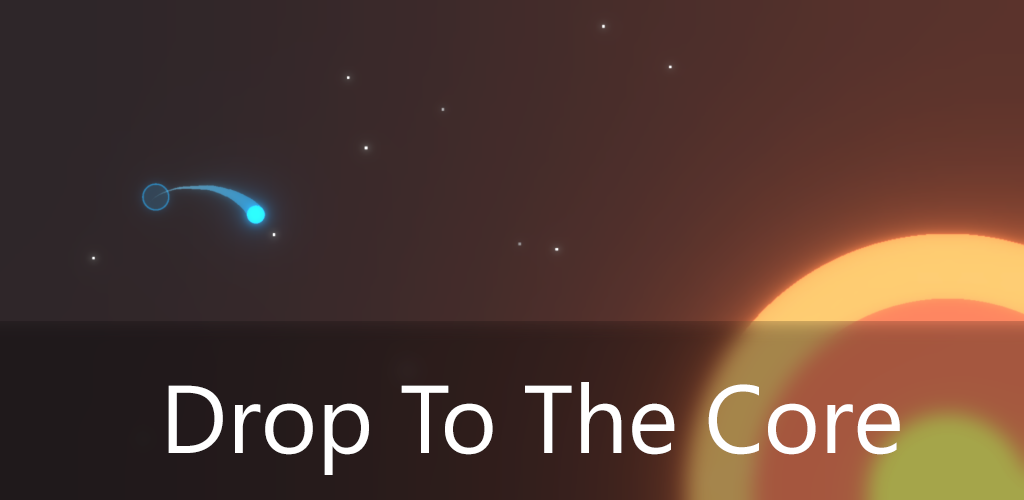
<style>
.page{position:relative;width:1024px;height:500px}
.page>*{position:absolute;margin:0}
.t1{font:96px "SegoeUI";color:#ffffff}
</style>
<div class="page">
<p class="t1" style="left:168px;top:382px;width:732px;height:93px">Drop To The Core</p>
</div>
